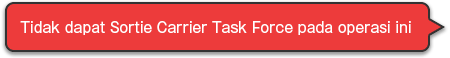
<style>
.page{position:relative;width:450px;height:58px;background:#ed3b3b}
.page>*{position:absolute;margin:0}
.t1{font:14px "GothicMB101Pro-Regular";color:#ffffff}
</style>
<div class="page">
<p class="t1" style="left:20px;top:21px;width:391px;height:14px">Tidak dapat Sortie Carrier Task Force pada operasi ini</p>
</div>
